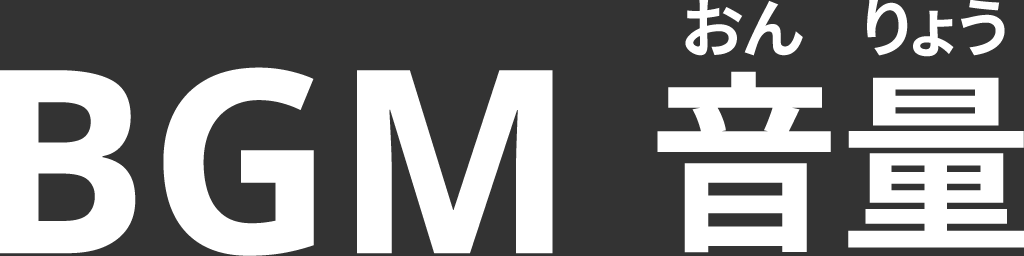
<style>
.page{position:relative;width:1024px;height:256px;background:#333333}
.page>*{position:absolute;margin:0}
.t1{font:64px "NotoSansJP-Bold";color:#ffffff}
.t2{font:256px "NotoSans-Bold";color:#ffffff}
.t3{font:192px "NotoSansJP-Bold";color:#ffffff}
</style>
<div class="page">
<p class="t1" style="left:685px;top:0px;width:118px;height:56px">おん</p>
<p class="t1" style="left:867px;top:0px;width:138px;height:57px">りょう</p>
<p class="t2" style="left:0px;top:67px;width:553px;height:189px">BGM</p>
<p class="t3" style="left:657px;top:71px;width:368px;height:182px">音量</p>
</div>
